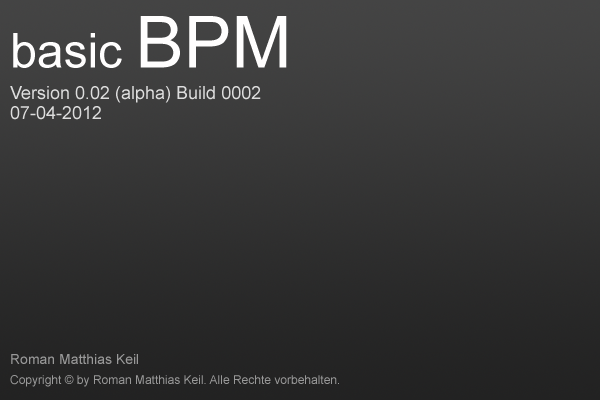
<style>
.page{position:relative;width:600px;height:400px}
.page>*{position:absolute;margin:0}
.t1{font:48px "ArialMT";color:#fffefe}
.t2{font:72px "ArialMT";color:#fffefe}
.t3{font:18px/7px "ArialMT";color:#dddddd}
.t4{font:18px/20px "ArialMT";color:#dddddd}
.t5{font:12px/20px "ArialMT";color:#999999}
.t6{font:14px/20px "ArialMT";color:#999999}
</style>
<div class="page">
<p class="t1" style="left:13px;top:16px;width:274px;height:52px">basic <span class="t2">BPM</span></p>
<p class="t3" style="left:10px;top:86px;width:251px;height:34px">Version 0.02 (alpha) Build 0002<br><span class="t4">07-04-2012</span></p>
<p class="t5" style="left:10px;top:354px;width:329px;height:33px"><span class="t6">Roman Matthias Keil<br></span>Copyright © by Roman Matthias Keil. Alle Rechte vorbehalten.</p>
</div>
